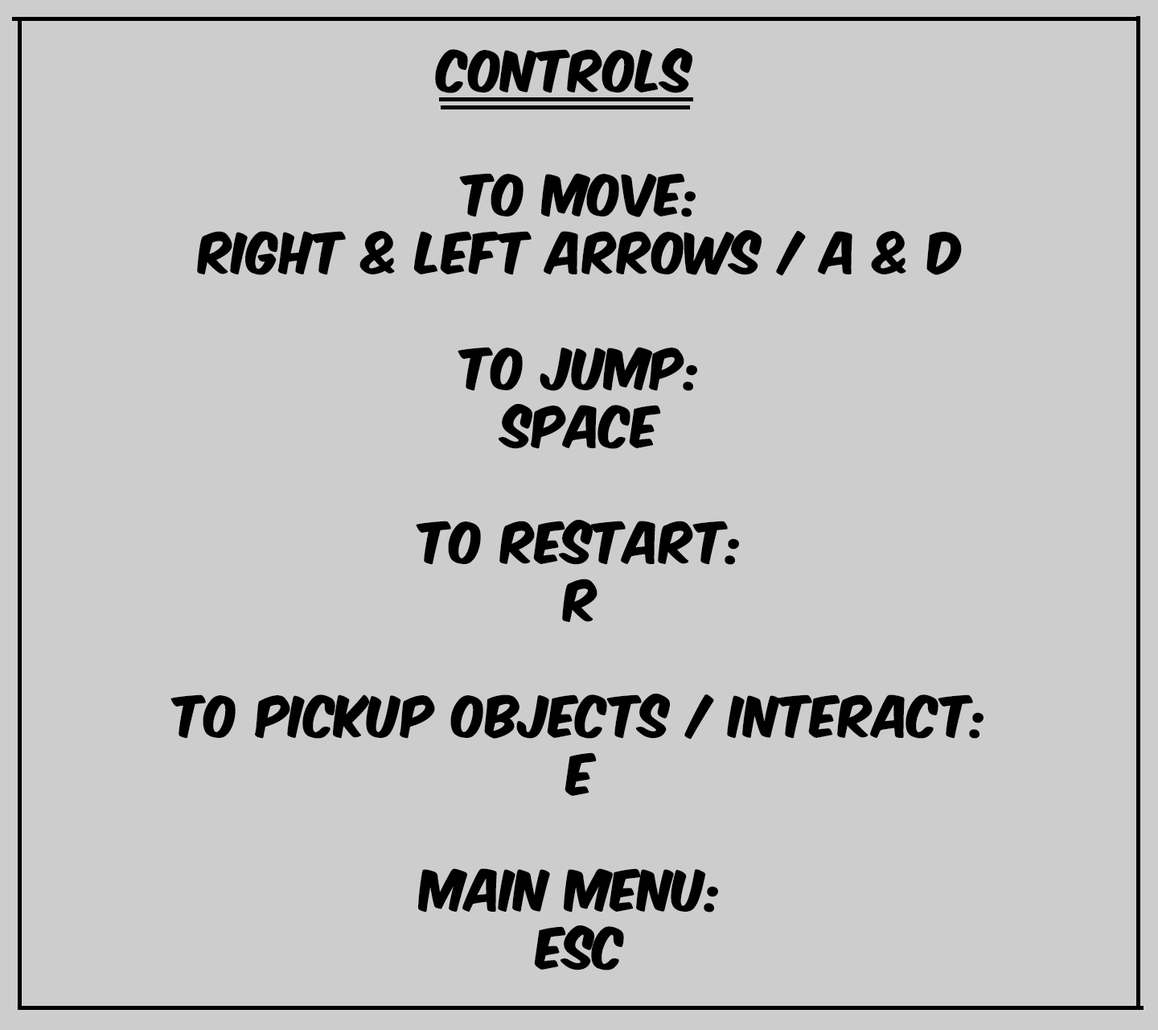
<style>
.page{position:relative;width:1158px;height:1030px;background:#cdcdcd}
.page>*{position:absolute;margin:0}
.t1{font:48.3px "KomikaAxis";color:#000000}
</style>
<div class="page">
<p class="t1" style="left:435px;top:48px;width:258px;height:45px">controls</p>
<p class="t1" style="left:171px;top:173px;width:813px;height:797px;text-align:center">to move:<br>right &amp; left arrows / a &amp; d<br><br>to jump:<br>space<br><br>to restart:<br>r<br><br>to pickup objects / interact:<br>e<br><br>main menu: <br>esc</p>
</div>
